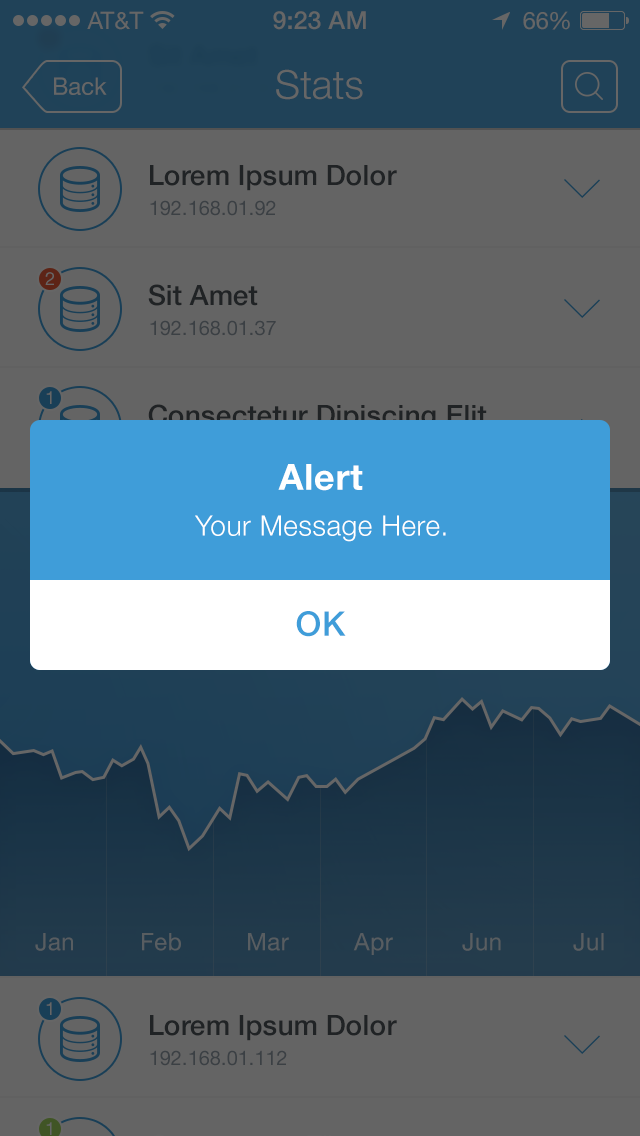
<style>
.page{position:relative;width:640px;height:1136px;background:#646464}
.page>*{position:absolute;margin:0}
.t1{font:24px "HelveticaNeue";color:#666666}
.t2{font:25px "HelveticaNeue-Medium";color:#666666}
.t3{font:24px "HelveticaNeue";letter-spacing:-0.02em;color:#666666}
.t4{font:40px "HelveticaNeue-Light";color:#666666}
.t5{font:28px "HelveticaNeue-Medium";color:#202325}
.t6{font:20px "HelveticaNeue";color:#3b4044}
.t7{font:18px "HelveticaNeue";color:#666666}
.t8{font:28px "HelveticaNeue-Medium"}
.t9{font:36px "HelveticaNeue-Bold";letter-spacing:0.02em;color:#ffffff}
.t10{font:28px "HelveticaNeue-Light";letter-spacing:0.02em;color:#ffffff}
.t11{font:34px "HelveticaNeue-Medium";letter-spacing:0.02em;color:#3f9dd9}
.t12{font:24px "HelveticaNeue";letter-spacing:0.02em;color:#585d61}
.t13{font:24px "HelveticaNeue";letter-spacing:0.02em;color:#595e61}
</style>
<div class="page">
<p class="t1" style="left:87px;top:11px;width:57px;height:19px">AT&amp;T</p>
<p class="t2" style="left:273px;top:11px;width:93px;height:19px">9:23 AM</p>
<p class="t1" style="left:523px;top:11px;width:47px;height:19px">6<span class="t3">6</span>%</p>
<p class="t1" style="left:54px;top:77px;width:53px;height:18px">Back</p>
<p class="t4" style="left:276px;top:69px;width:87px;height:31px">Stats</p>
<p class="t5" style="left:150px;top:165px;width:247px;height:26px">Lorem Ipsum Dolor</p>
<p class="t6" style="left:150px;top:200px;width:126px;height:16px">192.168.01.92</p>
<p class="t7" style="left:45px;top:272px;width:9px;height:13px">2</p>
<p class="t5" style="left:148px;top:284px;width:110px;height:22px">Sit Amet</p>
<p class="t6" style="left:150px;top:320px;width:126px;height:16px">192.168.01.37</p>
<p class="t7" style="left:46px;top:391px;width:6px;height:13px">1</p>
<p class="t8" style="left:148px;top:404px;width:339px;height:27px">Consectetur Dipiscing Elit</p>
<p class="t9" style="left:278px;top:464px;width:85px;height:27px">Alert</p>
<p class="t10" style="left:195px;top:515px;width:251px;height:27px">Your Message Here.</p>
<p class="t11" style="left:296px;top:611px;width:50px;height:26px">OK</p>
<p class="t12" style="left:35px;top:933px;width:38px;height:18px">Jan</p>
<p class="t12" style="left:142px;top:933px;width:39px;height:18px">Feb</p>
<p class="t12" style="left:248px;top:933px;width:41px;height:18px">Mar</p>
<p class="t12" style="left:353px;top:933px;width:40px;height:22px">Apr</p>
<p class="t13" style="left:462px;top:933px;width:39px;height:18px">Jun</p>
<p class="t13" style="left:573px;top:933px;width:31px;height:18px">Jul</p>
<p class="t7" style="left:46px;top:1002px;width:6px;height:13px">1</p>
<p class="t5" style="left:150px;top:1015px;width:247px;height:26px">Lorem Ipsum Dolor</p>
<p class="t6" style="left:150px;top:1050px;width:137px;height:16px">192.168.01.112</p>
<p class="t7" style="left:46px;top:1122px;width:6px;height:13px">1</p>
</div>
